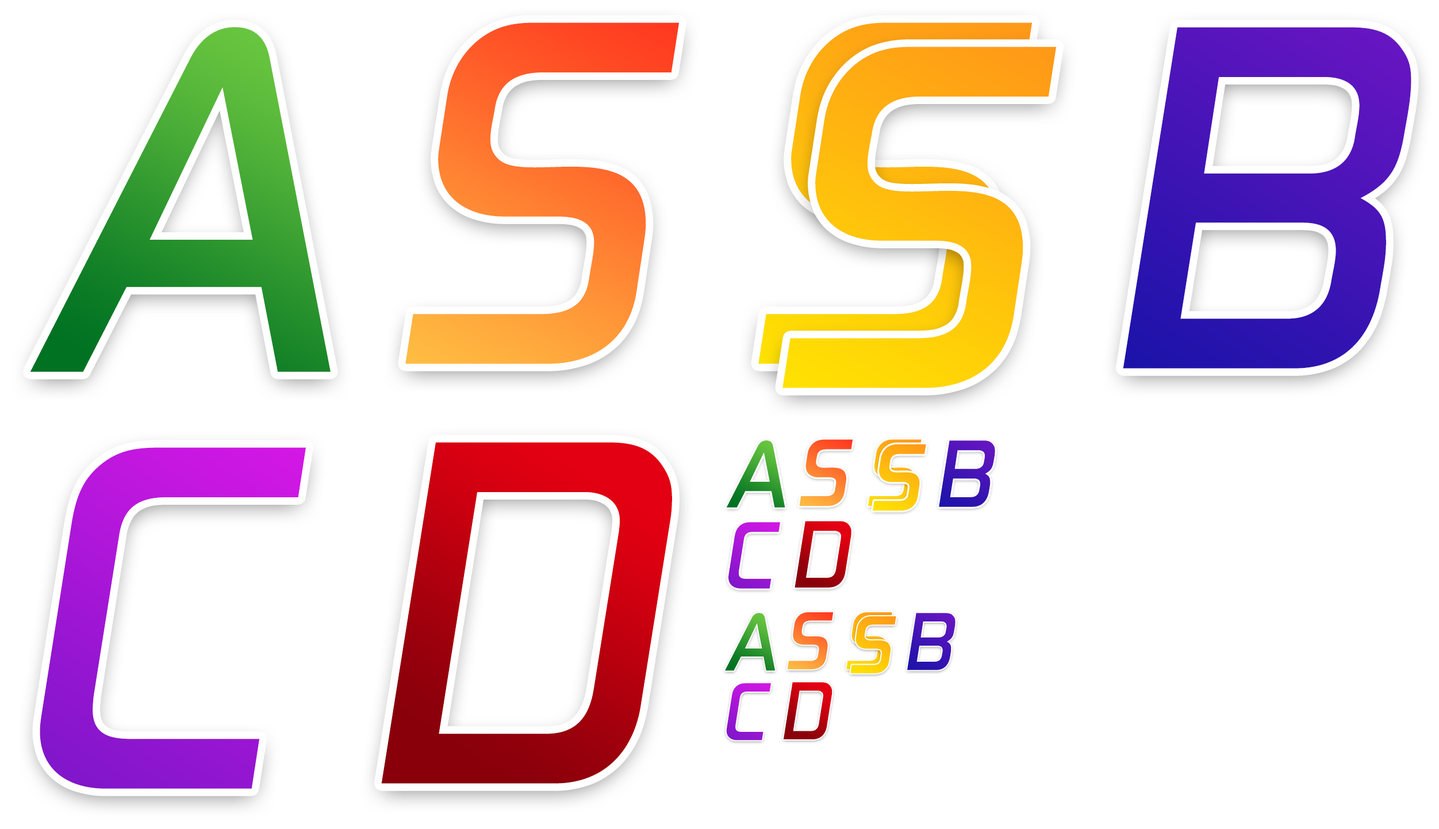
<style>
.page{position:relative;width:1439px;height:829px;background:#ffffff}
.page>*{position:absolute;margin:0}
.t1{font:511px "DigitalEF-MediumItalic"}
.t2{font:99.3px "DigitalEF-MediumItalic"}
.t3{font:85.3px "DigitalEF-MediumItalic"}
</style>
<div class="page">
<p class="t1" style="left:30px;top:27px;width:301px;height:345px">A</p>
<p class="t1" style="left:405px;top:22px;width:274px;height:342px">S</p>
<p class="t1" style="left:758px;top:22px;width:274px;height:342px">S</p>
<p class="t1" style="left:1123px;top:27px;width:288px;height:341px">B</p>
<p class="t1" style="left:782px;top:47px;width:274px;height:341px">S</p>
<p class="t1" style="left:40px;top:447px;width:266px;height:342px">C</p>
<p class="t1" style="left:381px;top:442px;width:291px;height:341px">D</p>
<p class="t2" style="left:726px;top:440px;width:59px;height:68px">A</p>
<p class="t2" style="left:799px;top:439px;width:54px;height:67px">S</p>
<p class="t2" style="left:867px;top:439px;width:54px;height:67px">S</p>
<p class="t2" style="left:873px;top:444px;width:53px;height:67px">S</p>
<p class="t2" style="left:939px;top:440px;width:56px;height:67px">B</p>
<p class="t2" style="left:728px;top:522px;width:52px;height:67px">C</p>
<p class="t2" style="left:794px;top:521px;width:57px;height:66px">D</p>
<p class="t3" style="left:725px;top:613px;width:50px;height:58px">A</p>
<p class="t3" style="left:787px;top:612px;width:46px;height:58px">S</p>
<p class="t3" style="left:846px;top:612px;width:46px;height:58px">S</p>
<p class="t3" style="left:850px;top:616px;width:46px;height:58px">S</p>
<p class="t3" style="left:907px;top:613px;width:48px;height:57px">B</p>
<p class="t3" style="left:726px;top:683px;width:45px;height:57px">C</p>
<p class="t3" style="left:783px;top:682px;width:49px;height:57px">D</p>
</div>
